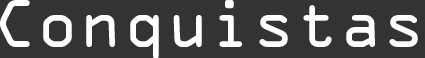
<style>
.page{position:relative;width:425px;height:58px;background:#333333}
.page>*{position:absolute;margin:0}
.t1{font:60.1px "OCRAStd";color:#ffffff}
</style>
<div class="page">
<p class="t1" style="left:0px;top:0px;width:418px;height:59px">Conquistas</p>
</div>
